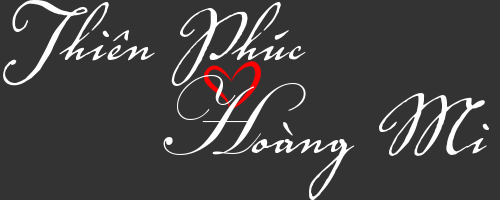
<style>
.page{position:relative;width:500px;height:200px;background:#333333}
.page>*{position:absolute;margin:0}
.t1{font:111.1px "VolutaScriptPro-Regular";color:#fffefe}
.t2{font:111.1px "EdwardianScriptITC";color:#fffefe}
</style>
<div class="page">
<p class="t1" style="left:3px;top:0px;width:303px;height:86px">Thiên Phúc</p>
<p class="t1" style="left:163px;top:75px;width:326px;height:125px"><span class="t2">H</span>oàng Mi</p>
</div>
